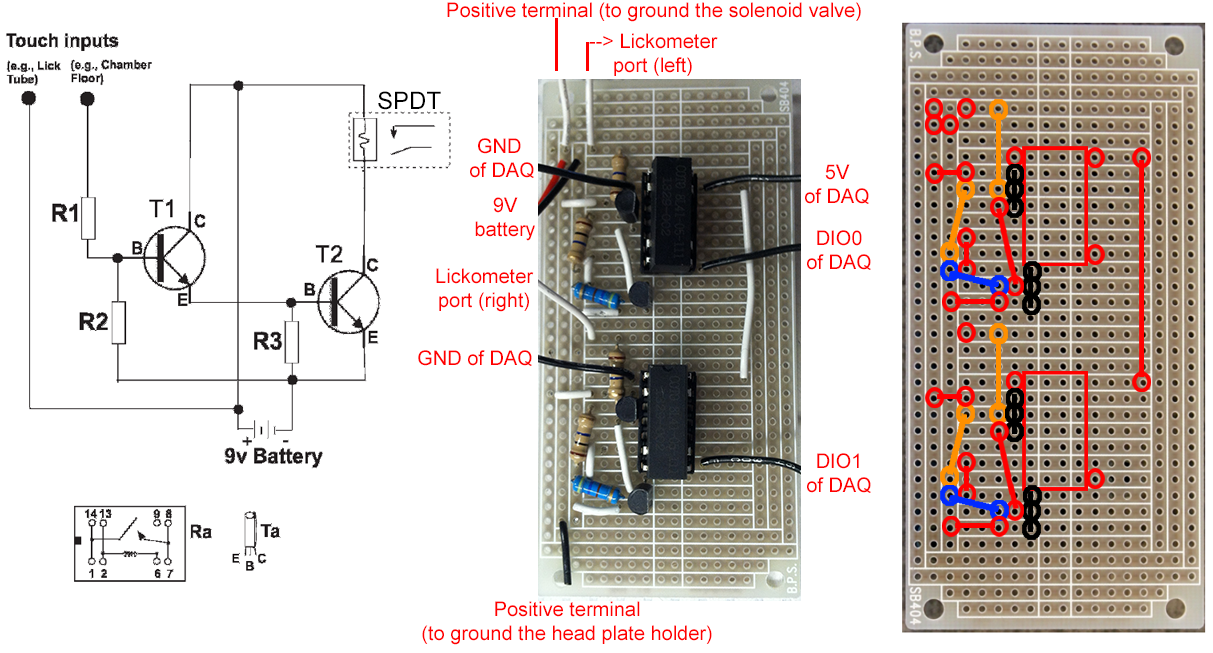
<style>
.page{position:relative;width:1213px;height:653px;background:#ffffff}
.page>*{position:absolute;margin:0}
.t1{font:20px "ArialMT";color:#ff0000}
.t2{font:24px "ArialMT";color:#000000}
</style>
<div class="page">
<p class="t1" style="left:447px;top:2px;width:414px;height:20px">Positive terminal (to ground the solenoid valve)</p>
<p class="t1" style="left:589px;top:33px;width:129px;height:43px;text-align:center">--&gt; Lickometer<br>port (left)</p>
<p class="t2" style="left:378px;top:91px;width:63px;height:19px">SPDT</p>
<p class="t1" style="left:470px;top:138px;width:64px;height:40px;text-align:center">GND <br>of DAQ</p>
<p class="t1" style="left:805px;top:164px;width:64px;height:40px;text-align:center">5V<br>of DAQ</p>
<p class="t1" style="left:475px;top:197px;width:60px;height:44px;text-align:center">9V<br>battery</p>
<p class="t1" style="left:807px;top:230px;width:64px;height:40px;text-align:center">DIO0<br>of DAQ</p>
<p class="t1" style="left:436px;top:268px;width:98px;height:44px;text-align:center">Lickometer<br>port (right)</p>
<p class="t1" style="left:418px;top:350px;width:114px;height:16px">GND of DAQ</p>
<p class="t1" style="left:807px;top:453px;width:64px;height:40px;text-align:center">DIO1<br>of DAQ</p>
<p class="t1" style="left:422px;top:601px;width:290px;height:44px;text-align:center">Positive terminal<br>(to ground the head plate holder)</p>
</div>
